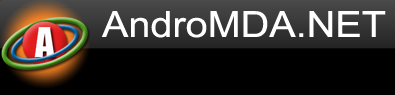
<style>
.page{position:relative;width:395px;height:95px;background:#000000}
.page>*{position:absolute;margin:0}
.t1{font:36px "ArialMT";color:#ffffff;scale:1.1 1}
</style>
<div class="page">
<p class="t1" style="left:101px;top:11px;width:285px;height:27px">AndroMDA.NET</p>
</div>
